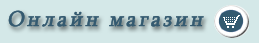
<style>
.page{position:relative;width:259px;height:43px;background:#d4e8e8}
.page>*{position:absolute;margin:0}
.t1{font:22px "Sylfaen";letter-spacing:0.099em;color:#345a70;font-weight:bold;font-style:italic}
</style>
<div class="page">
<p class="t1" style="left:8px;top:10px;width:196px;height:17px">Онлайн магазин</p>
</div>
